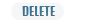
<style>
.page{position:relative;width:98px;height:24px;background:#ffffff}
.page>*{position:absolute;margin:0}
.t1{font:12px "DenkOne-Regular";color:#41738e}
</style>
<div class="page">
<p class="t1" style="left:22px;top:6px;width:33px;height:10px">DELETE</p>
</div>
